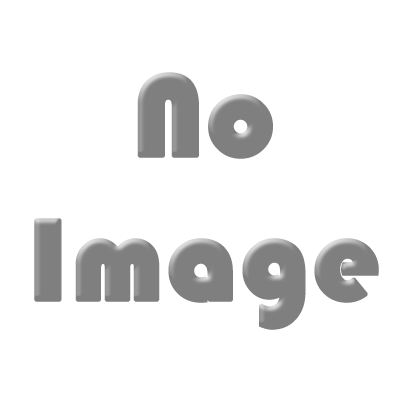
<style>
.page{position:relative;width:400px;height:400px;background:#ffffff}
.page>*{position:absolute;margin:0}
.t1{font:120px "Bauhaus93";color:#7f7f7f;font-weight:bold}
</style>
<div class="page">
<p class="t1" style="left:34px;top:72px;width:345px;height:258px;text-align:center">No<br>Image</p>
</div>
